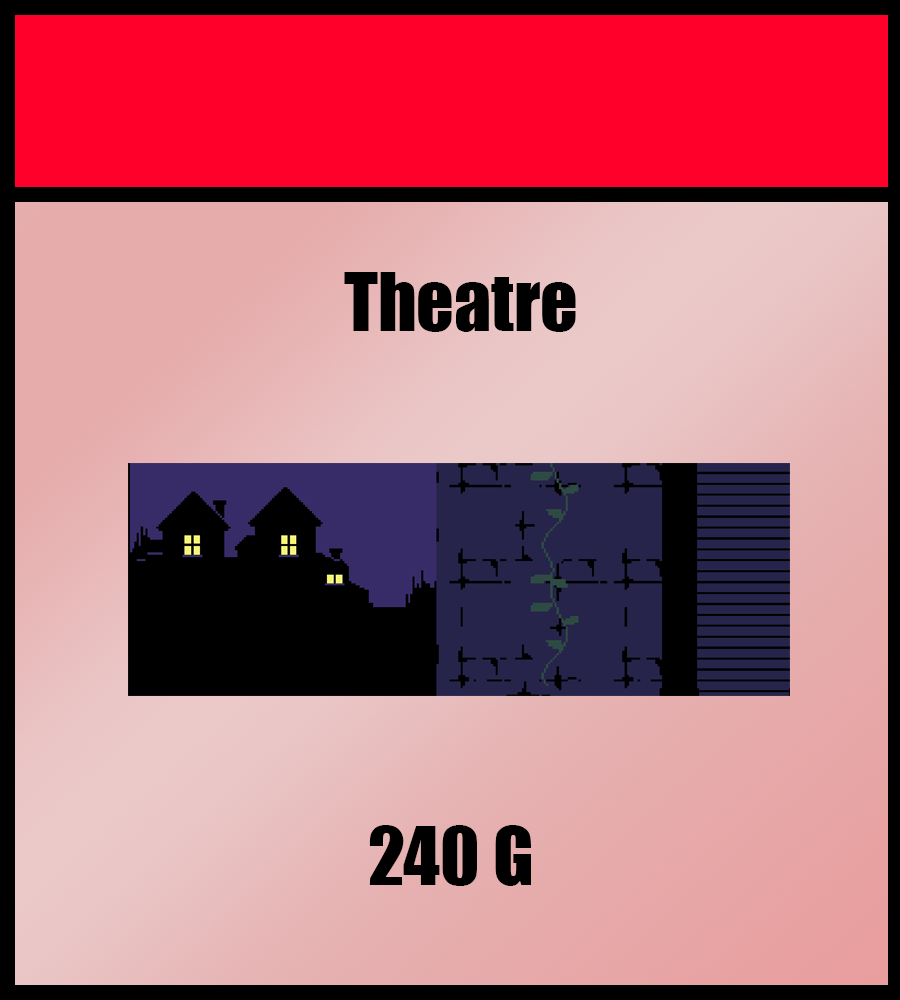
<style>
.page{position:relative;width:900px;height:1000px}
.page>*{position:absolute;margin:0}
.t1{font:74px "Impact";color:#000000}
</style>
<div class="page">
<p class="t1" style="left:344px;top:272px;width:232px;height:60px">Theatre</p>
<p class="t1" style="left:369px;top:825px;width:162px;height:61px">240 G</p>
</div>
